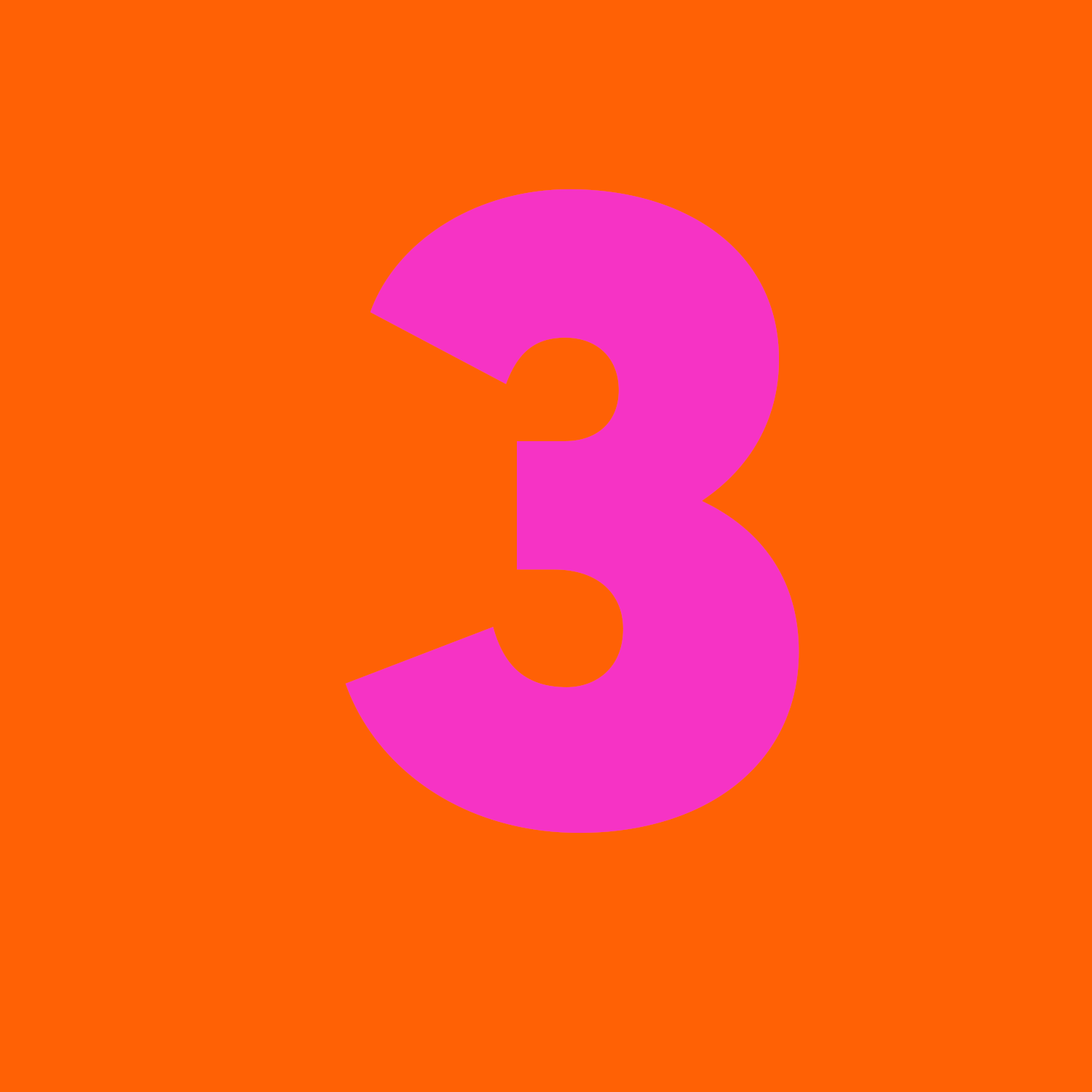
<style>
.page{position:relative;width:1092px;height:1092px;background:#ff6105}
.page>*{position:absolute;margin:0}
.t1{font:910px "AvertaStd-Black";letter-spacing:-0.05em;color:#f633c5}
</style>
<div class="page">
<p class="t1" style="left:345px;top:189px;width:454px;height:644px">3</p>
<p class="t1" style="left:345px;top:189px;width:454px;height:644px">3</p>
</div>
